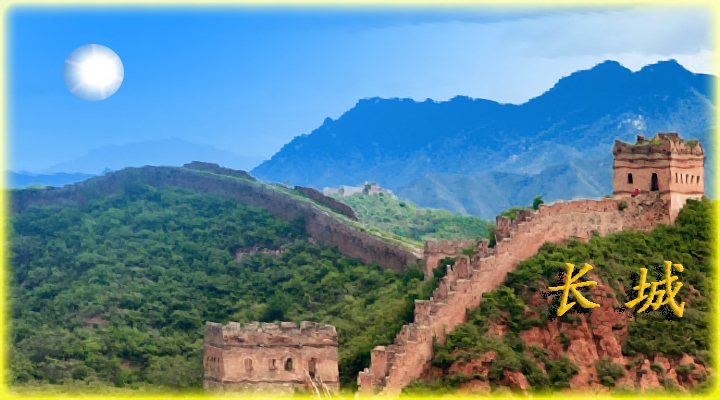
<style>
.page{position:relative;width:720px;height:400px}
.page>*{position:absolute;margin:0}
.t1{font:64px "¿¬Ìå";letter-spacing:0.3em;font-weight:bold;font-style:italic}
</style>
<div class="page">
<p class="t1" style="left:548px;top:261px;width:137px;height:56px">长城</p>
</div>
